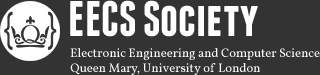
<style>
.page{position:relative;width:320px;height:75px;background:#333333}
.page>*{position:absolute;margin:0}
.t1{font:50px "FranchiseFree-Bold";color:#ffffff}
.t2{font:12.5px "Vollkorn-Regular";color:#ffffff}
</style>
<div class="page">
<p class="t1" style="left:70px;top:0px;width:188px;height:37px">EECS Society</p>
<p class="t2" style="left:70px;top:48px;width:250px;height:27px">Electronic Engineering and Computer Science<br>Queen Mary, University of London</p>
</div>
